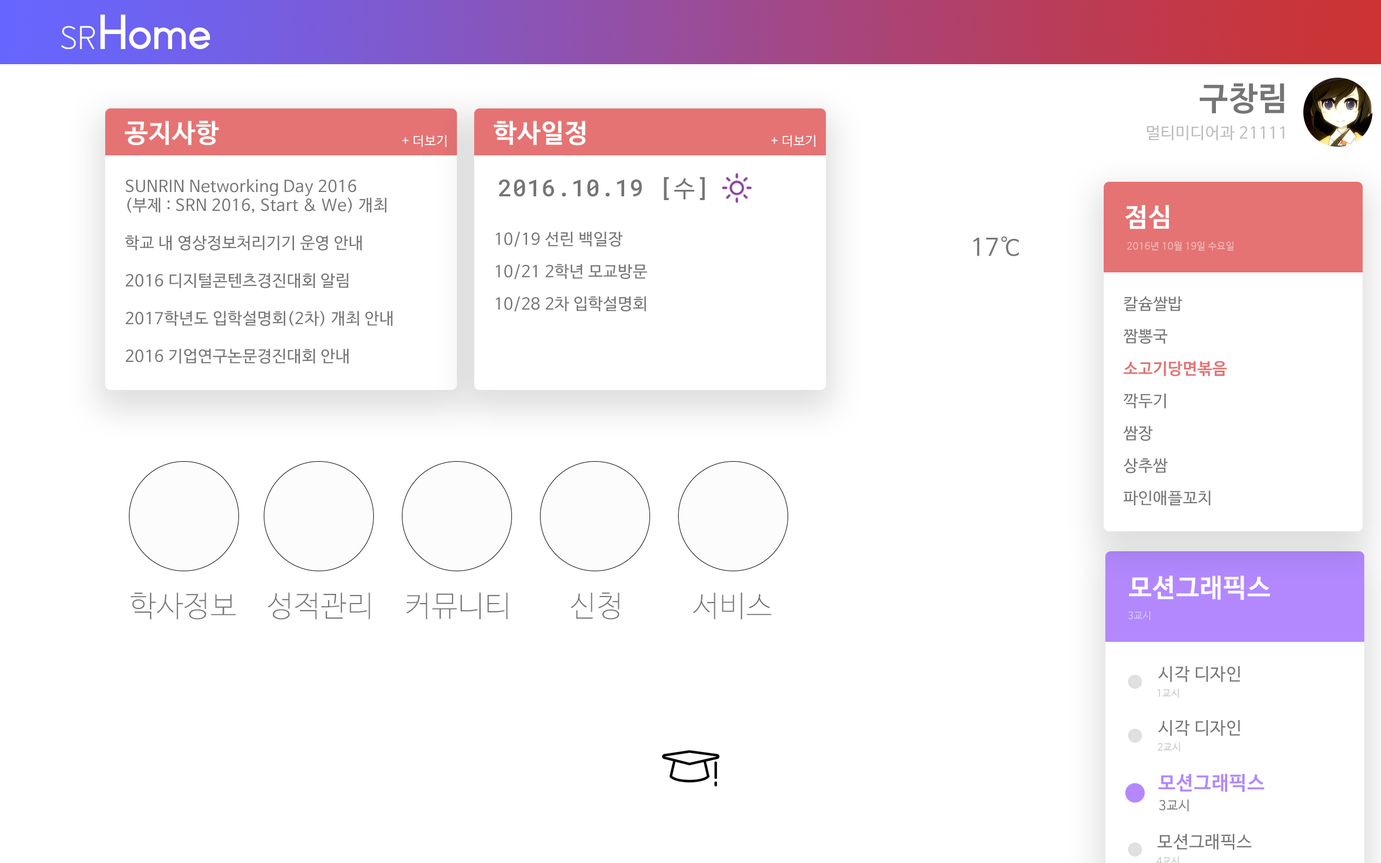
<style>
.page{position:relative;width:1381px;height:863px;background:#ffffff}
.page>*{position:absolute;margin:0}
.t1{font:32.4px "NanumBarunGothicBold";letter-spacing:0.025em;color:#757575}
.t2{font:25.9px "NanumBarunGothicBold";letter-spacing:0.025em;color:#ffffff}
.t3{font:16.2px "NanumBarunGothic";letter-spacing:0.025em;color:#bdbdbd}
.t4{font:12.8px "NanumBarunGothic";letter-spacing:0.025em;color:#ffffff}
.t5{font:16.2px/18.9px "NanumBarunGothic";letter-spacing:0.025em;color:#757575}
.t6{font:16.2px/32.4px "NanumBarunGothic";letter-spacing:0.025em;color:#757575}
.t7{font:23.4px "RobotoMono-Medium";letter-spacing:0.025em;color:#757575}
.t8{font:23.4px "NanumBarunGothic";letter-spacing:0.025em;color:#757575}
.t9{font:24.2px "NanumBarunGothic";letter-spacing:0.025em;color:#757575}
.t10{font:9.7px "NanumBarunGothic";letter-spacing:0.025em;color:#f2c1c1}
.t11{font:16.2px/32.4px "NanumBarunGothicBold";letter-spacing:0.025em;color:#e57373}
.t12{font:29.2px "NanumBarunGothicUltraLight";letter-spacing:0.025em;color:#757575}
.t13{font:9.7px "NanumBarunGothic";letter-spacing:0.025em;color:#dbc9ff}
.t14{font:17.3px "NanumBarunGothic";letter-spacing:0.025em;color:#757575}
.t15{font:9.7px "NanumBarunGothic";letter-spacing:0.025em;color:#c1c1c1}
.t16{font:19.4px "NanumBarunGothicBold";letter-spacing:0.025em;color:#b388ff}
.t17{font:12.9px "NanumBarunGothic";letter-spacing:0.025em;color:#757575}
</style>
<div class="page">
<p class="t1" style="left:1200px;top:83px;width:85px;height:31px">구창림</p>
<p class="t2" style="left:125px;top:121px;width:94px;height:24px">공지사항</p>
<p class="t2" style="left:494px;top:121px;width:92px;height:25px">학사일정</p>
<p class="t3" style="left:1147px;top:125px;width:138px;height:15px">멀티미디어과 21111</p>
<p class="t4" style="left:403px;top:135px;width:44px;height:12px">+ 더보기</p>
<p class="t4" style="left:772px;top:135px;width:44px;height:12px">+ 더보기</p>
<p class="t5" style="left:125px;top:179px;width:268px;height:185px"><span class="t6">SUNRIN Networking Day 2016<br></span>(부제 : SRN 2016, Start &amp; We) 개최<br><br>학교 내 영상정보처리기기 운영 안내<br><br>2016 디지털콘텐츠경진대회 알림<br><br>2017학년도 입학설명회(2차) 개최 안내<br><br>2016 기업연구논문경진대회 안내</p>
<p class="t7" style="left:499px;top:177px;width:206px;height:23px">2016.10.19 [<span class="t8">수</span>]</p>
<p class="t2" style="left:1125px;top:205px;width:44px;height:24px">점심</p>
<p class="t6" style="left:496px;top:231px;width:151px;height:81px">10/19 선린 백일장<br>10/21 2학년 모교방문<br>10/28 2차 입학설명회</p>
<p class="t9" style="left:973px;top:236px;width:46px;height:20px">17℃</p>
<p class="t10" style="left:1127px;top:241px;width:107px;height:10px">2016년 10월 19일 수요일</p>
<p class="t6" style="left:1123px;top:296px;width:104px;height:210px">칼슘쌀밥<br>짬뽕국<br><span class="t11">소고기당면볶음<br></span>깍두기<br>쌈장<br>상추쌈<br>파인애플꼬치</p>
<p class="t2" style="left:1129px;top:576px;width:141px;height:24px">모션그래픽스</p>
<p class="t12" style="left:131px;top:592px;width:105px;height:28px">학사정보</p>
<p class="t12" style="left:268px;top:592px;width:102px;height:28px">성적관리</p>
<p class="t12" style="left:406px;top:592px;width:102px;height:27px">커뮤니티</p>
<p class="t12" style="left:571px;top:592px;width:48px;height:28px">신청</p>
<p class="t12" style="left:693px;top:592px;width:79px;height:27px">서비스</p>
<p class="t13" style="left:1128px;top:611px;width:23px;height:9px">3교시</p>
<p class="t14" style="left:1158px;top:666px;width:82px;height:17px">시각 디자인</p>
<p class="t15" style="left:1158px;top:689px;width:21px;height:9px">1교시</p>
<p class="t14" style="left:1158px;top:720px;width:82px;height:16px">시각 디자인</p>
<p class="t15" style="left:1158px;top:743px;width:22px;height:9px">2교시</p>
<p class="t16" style="left:1158px;top:774px;width:107px;height:19px">모션그래픽스</p>
<p class="t17" style="left:1160px;top:800px;width:29px;height:12px">3교시</p>
<p class="t14" style="left:1157px;top:834px;width:95px;height:16px">모션그래픽스</p>
</div>
